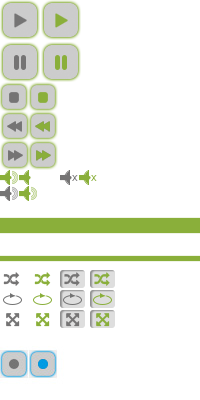
<style>
.page{position:relative;width:200px;height:400px;background:#ffffff}
.page>*{position:absolute;margin:0}
.t1{font:11px "Helvetica-Light";color:#757474}
.t2{font:11px "Helvetica-Light";color:#8aaf3a}
</style>
<div class="page">
<p class="t1" style="left:72px;top:175px;width:6px;height:6px">x</p>
<p class="t2" style="left:91px;top:175px;width:6px;height:6px">x</p>
</div>
